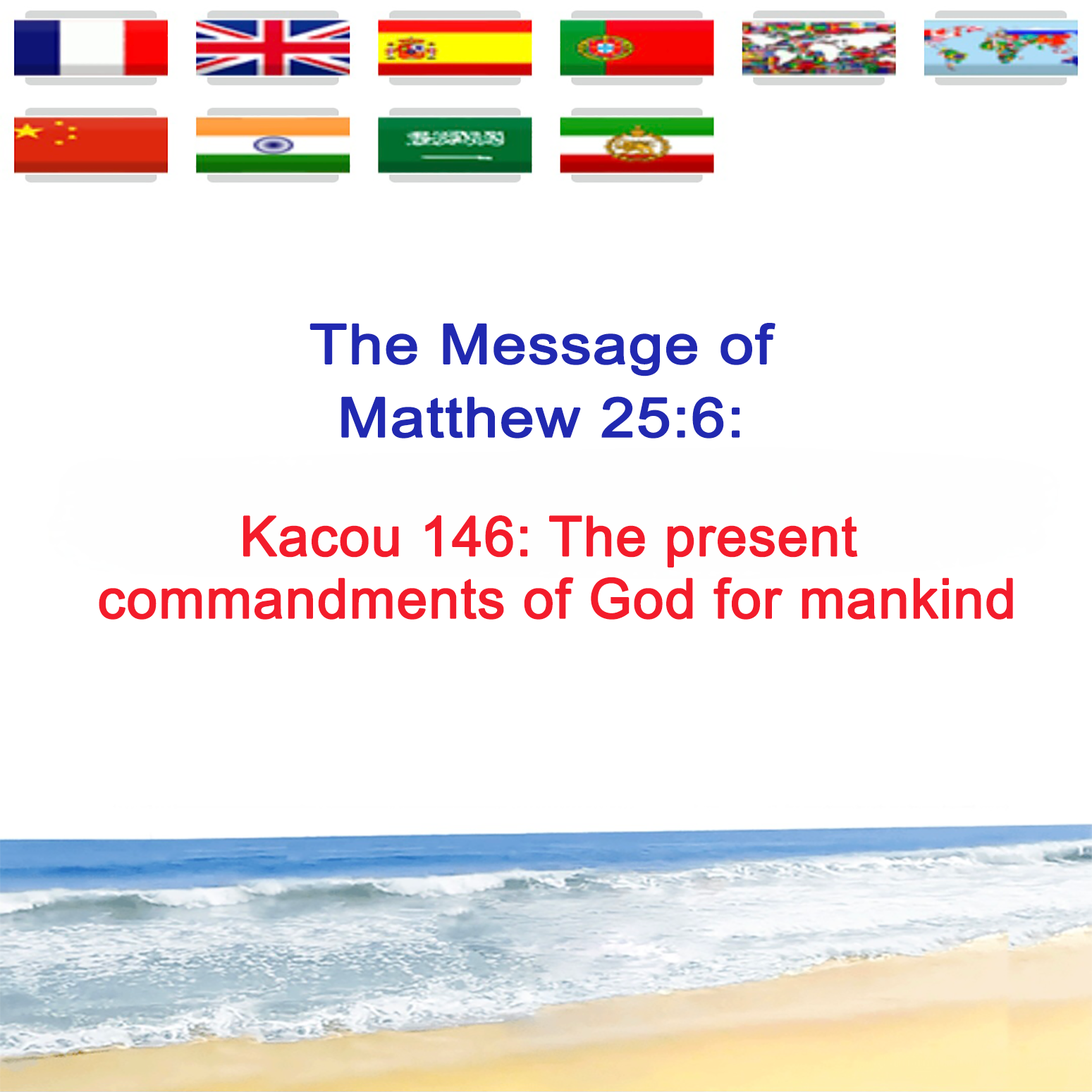
<style>
.page{position:relative;width:1092px;height:1092px;background:#ffffff}
.page>*{position:absolute;margin:0}
.t1{font:54.7px/73.3px "ArialMT";color:#2129b1;font-weight:bold;scale:1.13 1}
.t2{font:55px/62.3px "ArialMT";color:#f31c2b;font-weight:bold}
</style>
<div class="page">
<p class="t1" style="left:309px;top:323px;width:466px;height:115px;text-align:center">The Message of<br>Matthew 25:6:</p>
<p class="t2" style="left:99px;top:515px;width:914px;height:105px;text-align:center">Kacou 146: The present <br>commandments of God for mankind</p>
</div>
